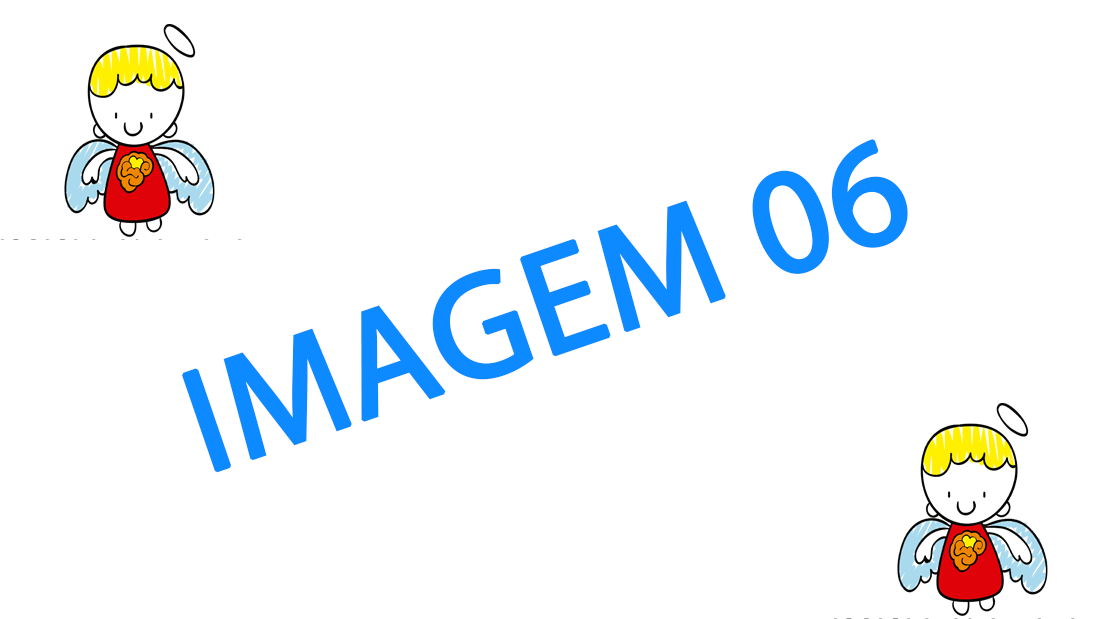
<style>
.page{position:relative;width:1100px;height:619px;background:#ffffff}
.page>*{position:absolute;margin:0}
.t1{font:150px "MyriadPro-Regular";color:#0d8aff;font-weight:bold}
</style>
<div class="page">
<p class="t1" style="left:182px;top:139px;width:726px;height:334px;rotate:-19deg">IMAGEM 06</p>
</div>
